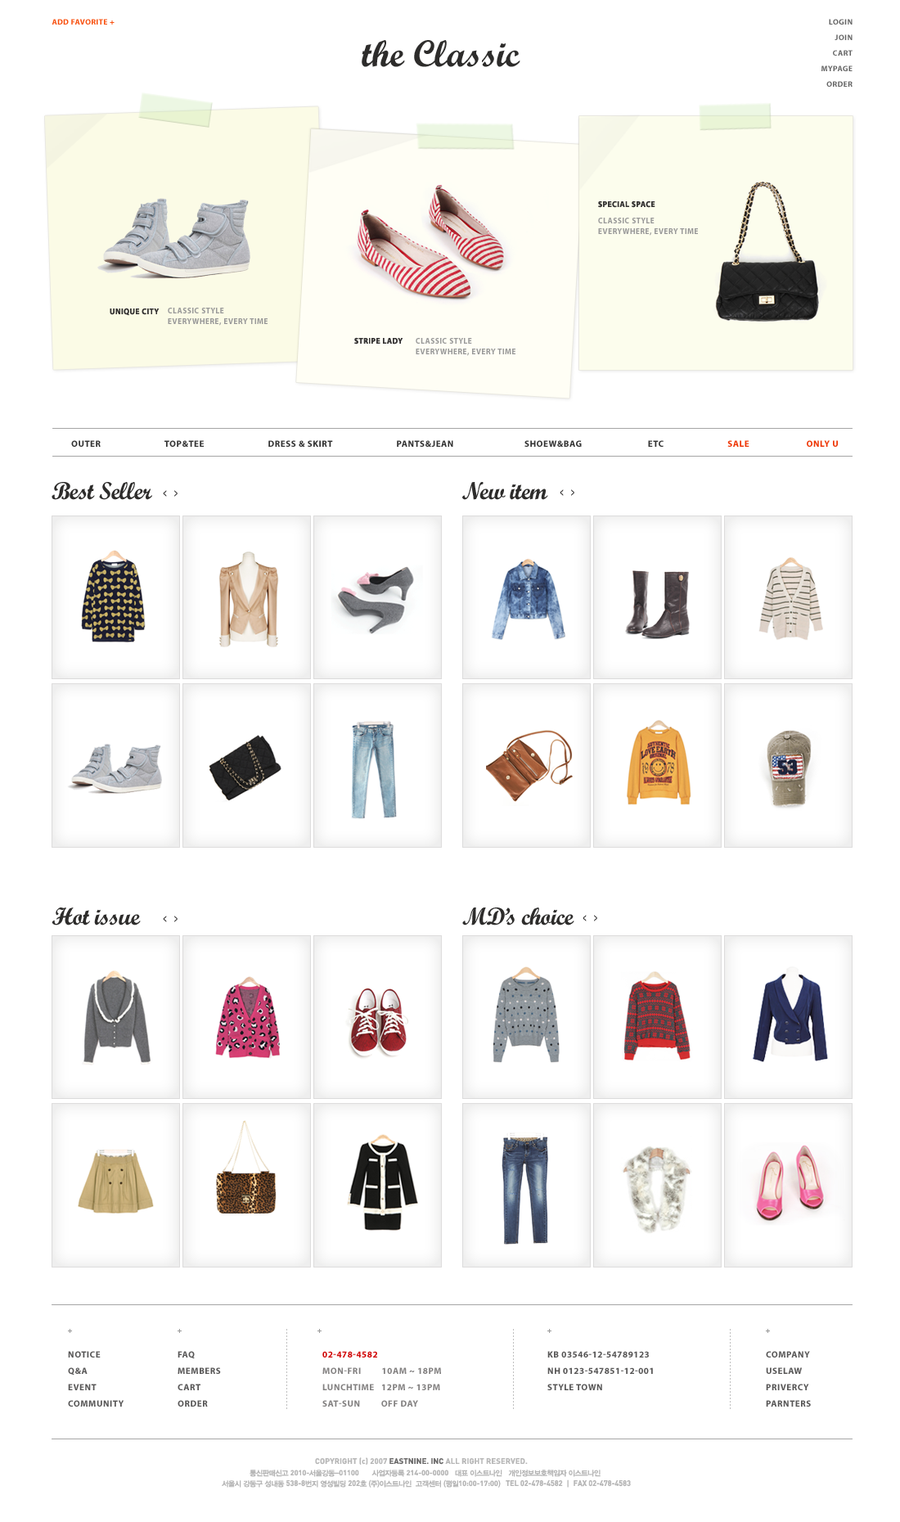
<style>
.page{position:relative;width:900px;height:1522px;background:#ffffff}
.page>*{position:absolute;margin:0}
.t1{font:7.8px "MyriadPro-Bold";letter-spacing:0.05em;color:#f84c09;text-transform:uppercase}
.t2{font:7.8px/15.5px "MyriadPro-Bold";letter-spacing:0.05em;color:#656565;text-transform:uppercase}
.t3{font:37.6px "ScriptMTBold";color:#2d2c2b}
.t4{font:8.4px "MyriadPro-Bold";letter-spacing:0.05em;color:#343232;text-transform:uppercase;scale:0.93 1}
.t5{font:8.4px/10.6px "MyriadPro-Bold";letter-spacing:0.05em;color:#999999;text-transform:uppercase;scale:0.93 1}
.t6{font:9px "MyriadPro-Bold";letter-spacing:0.05em;color:#333333;text-transform:uppercase}
.t7{font:9px "MyriadPro-Bold";letter-spacing:0.05em;color:#ee3504;text-transform:uppercase}
.t8{font:24.5px "ScriptMTBold";letter-spacing:-0.025em;color:#2d2c2b}
.t9{font:10.6px "FuturaBT-Heavy";letter-spacing:1.4em;color:#2b2a2a;scale:0.46 1}
.t10{font:9px/16.4px "MyriadPro-Bold";letter-spacing:0.05em;color:#575656;text-transform:uppercase}
.t11{font:9px/16.4px "MyriadPro-Bold";letter-spacing:0.05em;color:#828080;text-transform:uppercase}
.t12{font:9px/16.4px "MyriadPro-Bold";letter-spacing:0.05em;color:#d00505;text-transform:uppercase}
.t13{font:7.8px "Dinbol";letter-spacing:0.01em;color:#b7b7b7}
.t14{font:7.4px/10.6px "YDIYGO340";letter-spacing:-0.05em;color:#b5b5b5}
.t15{font:7.4px/10.6px "Dinbol";color:#b5b5b5}
.t16{font:7.4px/10.6px "Dinbol";letter-spacing:-0.05em;color:#b5b5b5}
.t17{font:8px/10.6px "Dinbol";color:#b5b5b5;text-transform:uppercase;scale:0.93 1}
.t18{font:7.4px/10.6px "YDIYGO340";color:#b5b5b5}
.t19{font:8px/10.6px "YDIYGO340";color:#b5b5b5;text-transform:uppercase;scale:0.93 1}
</style>
<div class="page">
<p class="t1" style="left:52px;top:19px;width:63px;height:6px">add favorite +</p>
<p class="t2" style="left:821px;top:19px;width:32px;height:68px;text-align:right">login<br>join<br>cart<br>mypage<br> order</p>
<p class="t3" style="left:362px;top:40px;width:158px;height:27px">the Classic</p>
<p class="t4" style="left:598px;top:200px;width:57px;height:8px">special space</p>
<p class="t5" style="left:598px;top:218px;width:100px;height:18px">classic style <br>everywhere, every time</p>
<p class="t4" style="left:110px;top:308px;width:50px;height:8px">unique city</p>
<p class="t5" style="left:168px;top:308px;width:100px;height:18px">classic style <br>everywhere, every time</p>
<p class="t4" style="left:354px;top:337px;width:49px;height:7px">stripe lady</p>
<p class="t5" style="left:416px;top:338px;width:99px;height:18px">classic style <br>everywhere, every time</p>
<p class="t6" style="left:71px;top:440px;width:767px;height:7px">outer                            top&amp;Tee                            Dress &amp; skirt                            Pants&amp;jean                               Shoew&amp;Bag                             etc                         <span class="t7">   sale                         only u</span></p>
<p class="t8" style="left:52px;top:482px;width:100px;height:18px">Best Seller</p>
<p class="t8" style="left:462px;top:482px;width:86px;height:18px">New item</p>
<p class="t9" style="left:163px;top:490px;width:15px;height:7px">&lt;&gt;</p>
<p class="t9" style="left:560px;top:489px;width:14px;height:7px">&lt;&gt;</p>
<p class="t8" style="left:52px;top:907px;width:89px;height:18px">Hot issue</p>
<p class="t9" style="left:163px;top:916px;width:15px;height:6px">&lt;&gt;</p>
<p class="t8" style="left:462px;top:907px;width:112px;height:18px">MD’s choice</p>
<p class="t9" style="left:583px;top:915px;width:14px;height:6px">&lt;&gt;</p>
<p class="t10" style="left:68px;top:1351px;width:56px;height:55px">notice<br>q&amp;a<br>event<br>community</p>
<p class="t10" style="left:178px;top:1351px;width:43px;height:55px">faq<br>members<br>cart <br>order</p>
<p class="t11" style="left:322px;top:1351px;width:119px;height:55px"><span class="t12">02-478-4582<br></span>mon-fri         10am ~ 18pm<br>lunchtime   12pm ~ 13pm<br>sat-sun         off day</p>
<p class="t10" style="left:547px;top:1351px;width:106px;height:39px">kb 03546-12-54789123<br>nh 0123-547851-12-001<br>style town</p>
<p class="t10" style="left:766px;top:1351px;width:45px;height:55px">company<br>uselaw<br>privercy<br>parnters</p>
<p class="t13" style="left:315px;top:1457px;width:213px;height:8px">COPYRIGHT (c) 2007 EASTNINE. INC ALL RIGHT RESERVED.</p>
<p class="t14" style="left:222px;top:1469px;width:409px;height:18px;text-align:center">통신판매신고 <span class="t15">2010</span><span class="t16">-</span>서울강동-<span class="t15">01100  </span>    사업자등록 <span class="t15">214-00-0000 </span>  대표 이스트나인   개인정보보호책임자 이스트나인 <br>서울시 강동구 성내동 <span class="t17">538-8</span>번지 영성빌딩 <span class="t17">202</span>호 (주)이스트나인  고객센터 (평일<span class="t15">10:00-17:00</span><span class="t18">)  </span><span class="t17">tel 02-478-4582 </span><span class="t19">ㅣ</span><span class="t17"> fax 02-478-4583</span></p>
</div>
